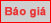
<style>
.page{position:relative;width:51px;height:23px;background:#cfcfcf}
.page>*{position:absolute;margin:0}
.t1{font:11px "Arial-BoldMT";color:#e93535;font-weight:bold}
</style>
<div class="page">
<p class="t1" style="left:5px;top:7px;width:41px;height:11px">Báo giá</p>
</div>
